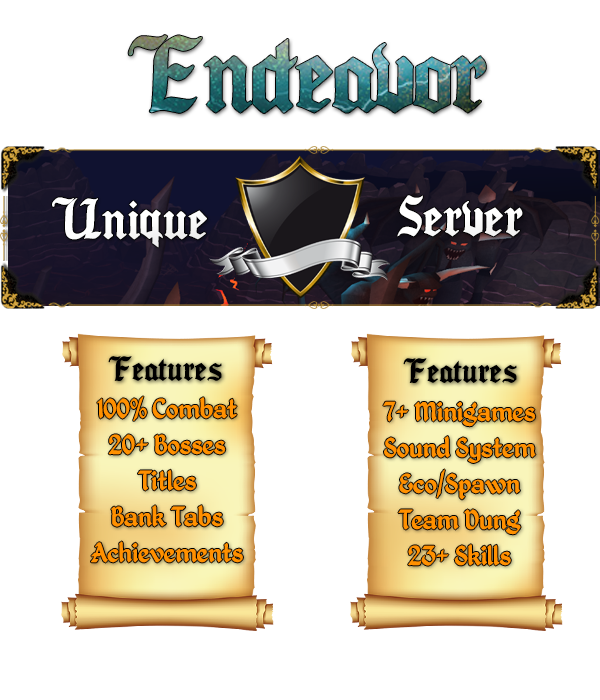
<style>
.page{position:relative;width:600px;height:700px;background:#ffffff}
.page>*{position:absolute;margin:0}
.t1{font:95px "Seagramtfb";letter-spacing:-0.03em}
.t2{font:48px "Seagramtfb";color:#ffffff}
.t3{font:30px "Seagramtfb";color:#000000}
.t4{font:30px "KingthingsPetrock";color:#ff9000}
</style>
<div class="page">
<p class="t1" style="left:128px;top:35px;width:358px;height:78px">Endeavor</p>
<p class="t2" style="left:52px;top:197px;width:155px;height:51px">Unique</p>
<p class="t2" style="left:397px;top:195px;width:126px;height:42px">Server</p>
<p class="t3" style="left:108px;top:356px;width:114px;height:25px">Features</p>
<p class="t3" style="left:403px;top:358px;width:114px;height:25px">Features</p>
<p class="t4" style="left:91px;top:396px;width:152px;height:167px;text-align:center">100% Combat<br>20+ Bosses<br>Titles<br>Bank Tabs<br>Achievements</p>
<p class="t4" style="left:383px;top:401px;width:153px;height:165px;text-align:center">7+ Minigames<br>Sound System<br>Eco/Spawn<br>Team Dung<br>23+ Skills</p>
</div>
